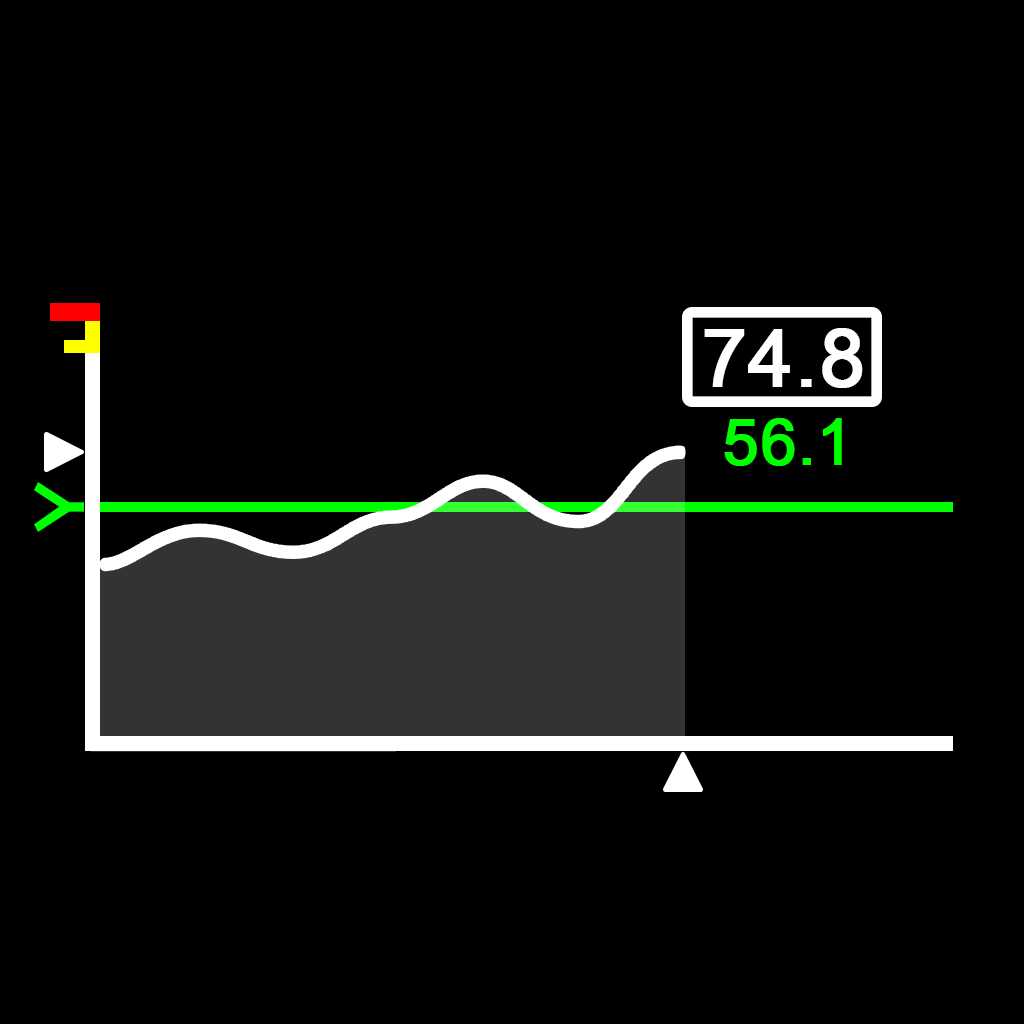
<style>
.page{position:relative;width:1024px;height:1024px;background:#000000}
.page>*{position:absolute;margin:0}
.t1{font:80px "ArialMT";color:#fefffe;font-weight:bold}
.t2{font:64px "ArialMT";color:#00ff00;font-weight:bold}
</style>
<div class="page">
<p class="t1" style="left:704px;top:328px;width:159px;height:60px">74.8</p>
<p class="t2" style="left:724px;top:418px;width:118px;height:48px">56.1</p>
</div>
